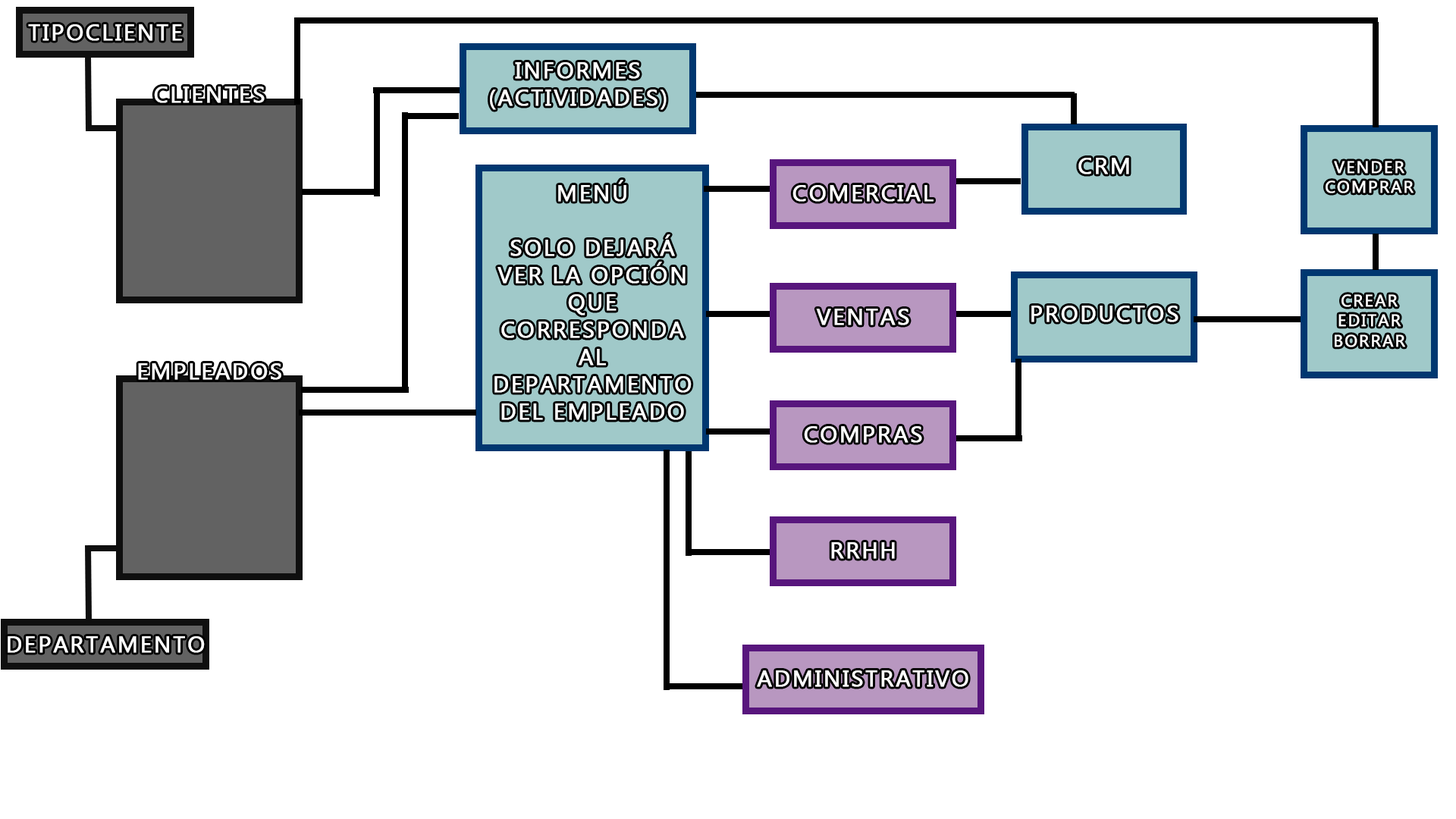
<style>
.page{position:relative;width:1456px;height:819px;background:#ffffff}
.page>*{position:absolute;margin:0}
.t1{font:22.7px "MicrosoftTaiLe";letter-spacing:0.075em;color:#ffffff;font-weight:bold}
.t2{font:16.7px "MicrosoftTaiLe";letter-spacing:0.075em;color:#ffffff;font-weight:bold}
</style>
<div class="page">
<p class="t1" style="left:28px;top:24px;width:154px;height:17px">TIPOCLIENTE</p>
<p class="t1" style="left:490px;top:62px;width:177px;height:48px;text-align:center">INFORMES<br>(ACTIVIDADES)</p>
<p class="t1" style="left:154px;top:86px;width:111px;height:17px">CLIENTES</p>
<p class="t1" style="left:1078px;top:158px;width:51px;height:16px">CRM</p>
<p class="t2" style="left:1326px;top:161px;width:88px;height:32px;text-align:center">VENDER<br>COMPRAR</p>
<p class="t1" style="left:494px;top:180px;width:198px;height:240px;text-align:center">MENÚ<br><br>SOLO DEJARÁ<br>VER LA OPCIÓN<br>QUE <br>CORRESPONDA<br>AL <br>DEPARTAMENTO<br>DEL EMPLEADO</p>
<p class="t1" style="left:792px;top:185px;width:141px;height:17px">COMERCIAL</p>
<p class="t1" style="left:1031px;top:306px;width:147px;height:16px">PRODUCTOS</p>
<p class="t2" style="left:1335px;top:294px;width:70px;height:53px;text-align:center">CREAR<br>EDITAR<br>BORRAR</p>
<p class="t1" style="left:816px;top:309px;width:93px;height:16px">VENTAS</p>
<p class="t1" style="left:138px;top:363px;width:143px;height:17px">EMPLEADOS</p>
<p class="t1" style="left:804px;top:426px;width:118px;height:17px">COMPRAS</p>
<p class="t1" style="left:831px;top:542px;width:64px;height:17px">RRHH</p>
<p class="t1" style="left:8px;top:636px;width:197px;height:17px">DEPARTAMENTO</p>
<p class="t1" style="left:757px;top:670px;width:211px;height:17px">ADMINISTRATIVO</p>
</div>
